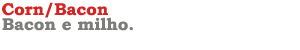
<style>
.page{position:relative;width:300px;height:50px;background:#ffffff}
.page>*{position:absolute;margin:0}
.t1{font:17px "BookmanOldStyle-Bold";color:#d42525}
.t2{font:17px "BookmanOldStyle-Bold";color:#7c7c79}
</style>
<div class="page">
<p class="t1" style="left:2px;top:2px;width:106px;height:16px">Corn/Bacon</p>
<p class="t2" style="left:2px;top:17px;width:131px;height:14px">Bacon e milho.</p>
</div>
